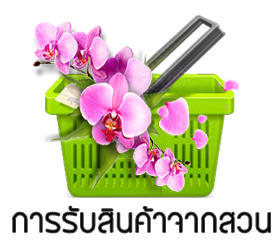
<style>
.page{position:relative;width:280px;height:245px;background:#ffffff}
.page>*{position:absolute;margin:0}
.t1{font:30px "BangnaNew";color:#020200}
</style>
<div class="page">
<p class="t1" style="left:13px;top:206px;width:257px;height:27px">การรับสินค้าจากสวน</p>
</div>
